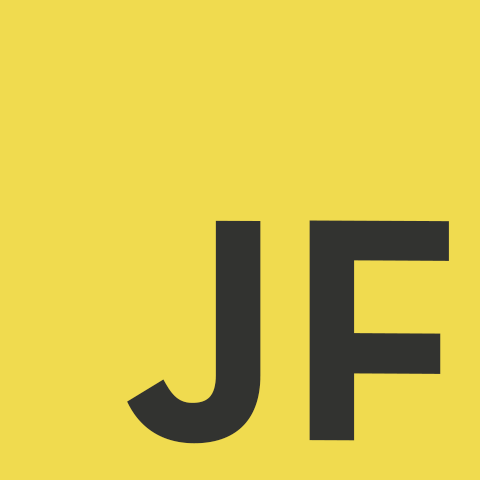
<style>
.page{position:relative;width:480px;height:480px;background:#f0db4f}
.page>*{position:absolute;margin:0}
.t1{font:323px "NeutraText-Bold";letter-spacing:0.022em;color:#323330;font-variant:small-caps}
</style>
<div class="page">
<p class="t1" style="left:127px;top:220px;width:322px;height:224px">JF</p>
</div>
